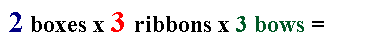
<style>
.page{position:relative;width:382px;height:50px;background:#ffffff}
.page>*{position:absolute;margin:0}
.t1{font:24px "TimesNewRomanPS-BoldMT";color:#000000}
.t2{font:30px "TimesNewRomanPS-BoldMT";color:#000082}
.t3{font:30px "TimesNewRomanPS-BoldMT";color:#ff0000}
.t4{font:24px "TimesNewRomanPS-BoldMT";color:#005826}
</style>
<div class="page">
<p class="t1" style="left:9px;top:12px;width:315px;height:20px"><span class="t2">2 </span>boxes x <span class="t3">3 </span>ribbons x <span class="t4">3 bows </span>=</p>
</div>
